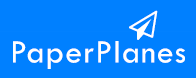
<style>
.page{position:relative;width:196px;height:78px;background:#0080ff}
.page>*{position:absolute;margin:0}
.t1{font:34px "TwCenMT-Regular";letter-spacing:0.025em;color:#ffffff}
</style>
<div class="page">
<p class="t1" style="left:13px;top:41px;width:172px;height:28px">PaperPlanes</p>
</div>
